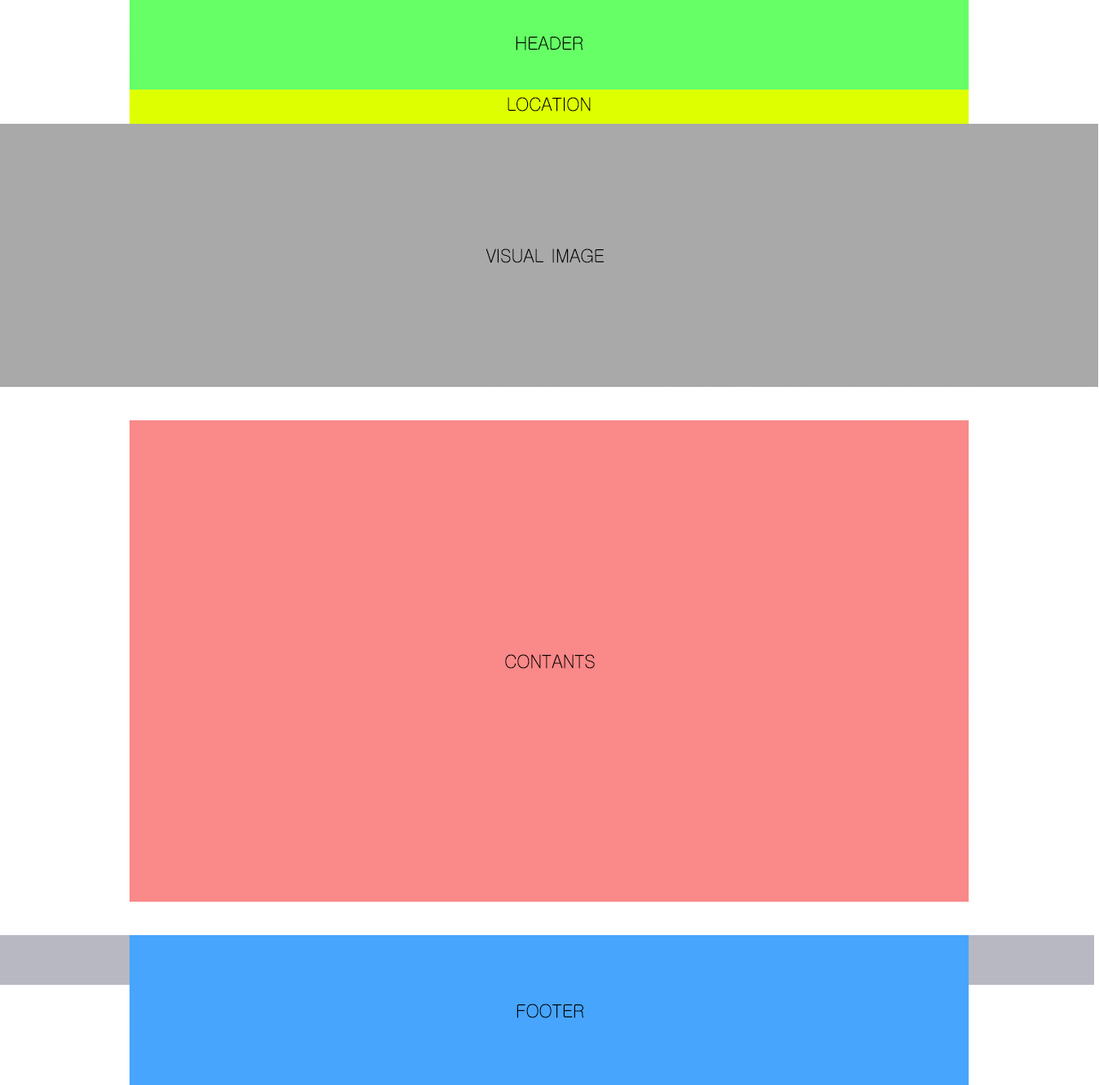
<style>
.page{position:relative;width:1099px;height:1085px;background:#fa8989}
.page>*{position:absolute;margin:0}
.t1{font:26.1px "Gulim";letter-spacing:-0.025em;color:#000000;font-variant:small-caps;scale:0.97 1}
</style>
<div class="page">
<p class="t1" style="left:516px;top:36px;width:66px;height:15px">header</p>
<p class="t1" style="left:508px;top:97px;width:83px;height:15px">location</p>
<p class="t1" style="left:486px;top:248px;width:118px;height:15px">visual image</p>
<p class="t1" style="left:505px;top:654px;width:90px;height:15px">contants</p>
<p class="t1" style="left:516px;top:1004px;width:67px;height:14px">footer</p>
</div>
